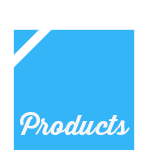
<style>
.page{position:relative;width:150px;height:150px;background:#34b5f7}
.page>*{position:absolute;margin:0}
.t1{font:27px "ThirstyScript-Bold";color:#f6f6f6}
</style>
<div class="page">
<p class="t1" style="left:20px;top:112px;width:110px;height:23px">Products</p>
</div>
